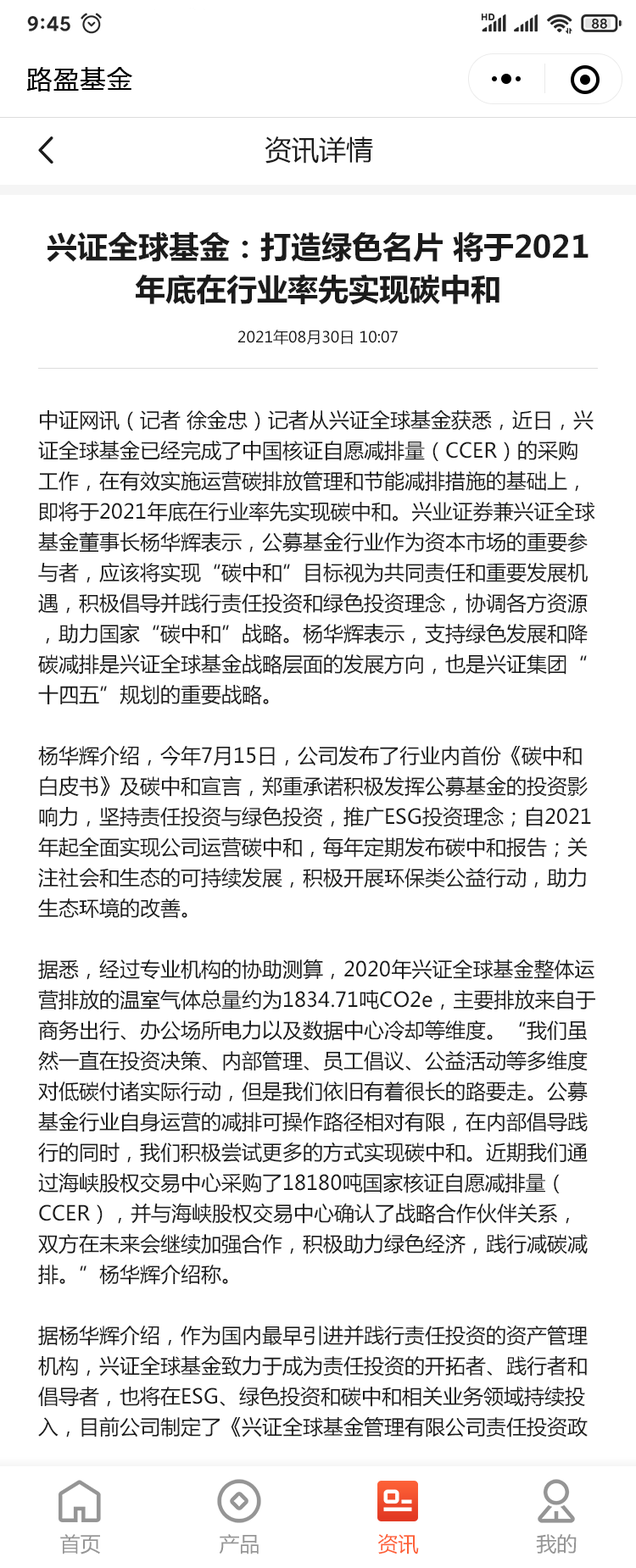
<style>
.page{position:relative;width:636px;height:1568px;background:#ffffff}
.page>*{position:absolute;margin:0}
.t1{font:25.4px "MicrosoftYaHei";letter-spacing:0.05em;color:#000000}
.t2{font:27.1px "MicrosoftYaHei";color:#1b1b1b}
.t3{font:30.5px/42.4px "MicrosoftYaHei-Bold";color:#1b1b1b}
.t4{font:15.3px "MicrosoftYaHei";color:#1b1b1b}
.t5{font:20.3px/30.5px "MicrosoftYaHei";color:#1b1b1b}
.t6{font:20.3px "MicrosoftYaHei";color:#959595}
.t7{font:20.3px "MicrosoftYaHei";color:#fd6036}
</style>
<div class="page">
<p class="t1" style="left:26px;top:67px;width:106px;height:25px">路盈基金</p>
<p class="t2" style="left:264px;top:136px;width:109px;height:28px">资讯详情</p>
<p class="t3" style="left:47px;top:231px;width:541px;height:74px;text-align:center">兴证全球基金：打造绿色名片 将于2021年底在行业率先实现碳中和</p>
<p class="t4" style="left:237px;top:330px;width:161px;height:15px">2021年08月30日 10:07</p>
<p class="t5" style="left:38px;top:410px;width:557px;height:1027px">中证网讯（记者 徐金忠）记者从兴证全球基金获悉，近日，兴证全球基金已经完成了中国核证自愿减排量（CCER）的采购工作，在有效实施运营碳排放管理和节能减排措施的基础上，即将于2021年底在行业率先实现碳中和。兴业证券兼兴证全球基金董事长杨华辉表示，公募基金行业作为资本市场的重要参与者，应该将实现“碳中和”目标视为共同责任和重要发展机遇，积极倡导并践行责任投资和绿色投资理念，协调各方资源，助力国家“碳中和”战略。杨华辉表示，支持绿色发展和降碳减排是兴证全球基金战略层面的发展方向，也是兴证集团“十四五”规划的重要战略。<br><br>杨华辉介绍，今年7月15日，公司发布了行业内首份《碳中和白皮书》及碳中和宣言，郑重承诺积极发挥公募基金的投资影响力，坚持责任投资与绿色投资，推广ESG投资理念；自2021年起全面实现公司运营碳中和，每年定期发布碳中和报告；关注社会和生态的可持续发展，积极开展环保类公益行动，助力生态环境的改善。<br><br>据悉，经过专业机构的协助测算，2020年兴证全球基金整体运营排放的温室气体总量约为1834.71吨CO2e，主要排放来自于商务出行、办公场所电力以及数据中心冷却等维度。“我们虽然一直在投资决策、内部管理、员工倡议、公益活动等多维度对低碳付诸实际行动，但是我们依旧有着很长的路要走。公募基金行业自身运营的减排可操作路径相对有限，在内部倡导践行的同时，我们积极尝试更多的方式实现碳中和。近期我们通过海峡股权交易中心采购了18180吨国家核证自愿减排量（CCER），并与海峡股权交易中心确认了战略合作伙伴关系，双方在未来会继续加强合作，积极助力绿色经济，践行减碳减排。”杨华辉介绍称。<br><br>据杨华辉介绍，作为国内最早引进并践行责任投资的资产管理机构，兴证全球基金致力于成为责任投资的开拓者、践行者和倡导者，也将在ESG、绿色投资和碳中和相关业务领域持续投入，目前公司制定了《兴证全球基金管理有限公司责任投资政策》《兴证全球基金管理有限公司环境、社会和公司治理（ESG）信息披露和对外沟通管理办法》等制度，将ESG、绿色投资、碳中和理念各项要求融入到公司管理和业务流程中。同时搭建了专门的管理架构，落实低碳运营理念和模式，优化ESG绿色投资流程，履行企业责任，推动绿色经济发展。<br><br>　　在公益领域，兴证全球基金持续加强低碳项目的投入。作为迄今为止公募基金行业唯一一家蚂蚁森林合作伙伴，自2017年起至今，兴证全球基金在内蒙古库布其沙漠、阿拉善沙漠等地捐资开展胡杨林公益植树项目，截至2021年6月底已累计投入近700万元，种植防沙治沙数目超过三万株，面积超过2500亩。“我们也积极倡导基金持有人们为‘兴证全球基金公益林’浇水、收集能量、认领胡杨，一起灌溉种植‘兴证全球基金公益林’。2020年，公司继续当选为阿拉善生态基金会理事单位，成为其中仅有的两家公募基金公司之一。未来，我们也会积极参与林业碳汇项目开发，为碳中和贡献力量。”杨华辉表示。</p>
<p class="t6" style="left:60px;top:1534px;width:40px;height:20px">首页</p>
<p class="t6" style="left:219px;top:1534px;width:40px;height:20px">产品</p>
<p class="t7" style="left:377px;top:1533px;width:42px;height:21px">资讯</p>
<p class="t6" style="left:536px;top:1534px;width:40px;height:20px">我的</p>
</div>
